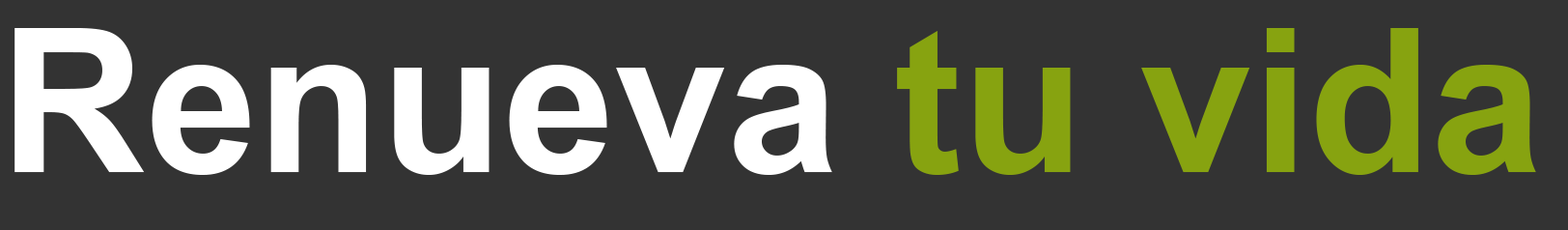
<style>
.page{position:relative;width:1568px;height:230px;background:#333333}
.page>*{position:absolute;margin:0}
.t1{font:201.1px "Arial-BoldMT";color:#ffffff}
.t2{font:201.1px "Arial-BoldMT";color:#87a310}
</style>
<div class="page">
<p class="t1" style="left:14px;top:28px;width:1522px;height:147px">Renueva <span class="t2">tu vida</span></p>
</div>
